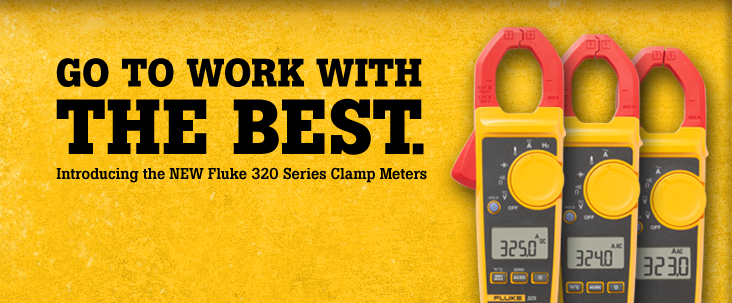
<style>
.page{position:relative;width:732px;height:303px}
.page>*{position:absolute;margin:0}
.t1{font:39.3px "BotonPro-Bold";letter-spacing:0.005em;color:#000000;text-transform:uppercase}
.t2{font:77.2px "BotonPro-Bold";letter-spacing:0.005em;color:#000000;text-transform:uppercase}
.t3{font:54.9px "BotonPro-Bold";letter-spacing:-0.01em;color:#000000;text-transform:uppercase}
.t4{font:15.5px "BotonPro-Medium";letter-spacing:-0.01em;color:#000000}
</style>
<div class="page">
<p class="t1" style="left:56px;top:58px;width:366px;height:29px">Go to work with</p>
<p class="t2" style="left:56px;top:98px;width:366px;height:57px">the best</p>
<p class="t3" style="left:412px;top:143px;width:12px;height:12px">.</p>
<p class="t4" style="left:56px;top:167px;width:371px;height:16px">Introducing the NEW Fluke 320 Series Clamp Meters</p>
</div>
